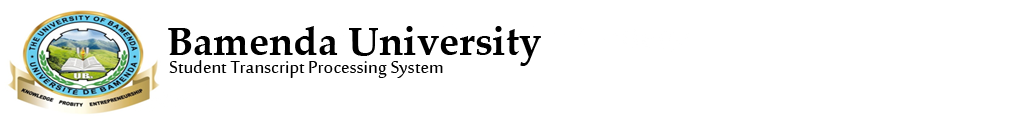
<style>
.page{position:relative;width:1017px;height:122px;background:#ffffff}
.page>*{position:absolute;margin:0}
.t1{font:40px "PalatinoLinotype-Bold";color:#000000}
.t2{font:24px "SakkalMajalla";color:#000000}
</style>
<div class="page">
<p class="t1" style="left:168px;top:26px;width:373px;height:40px">Bamenda University</p>
<p class="t2" style="left:169px;top:60px;width:274px;height:18px">Student Transcript Processing System</p>
</div>
